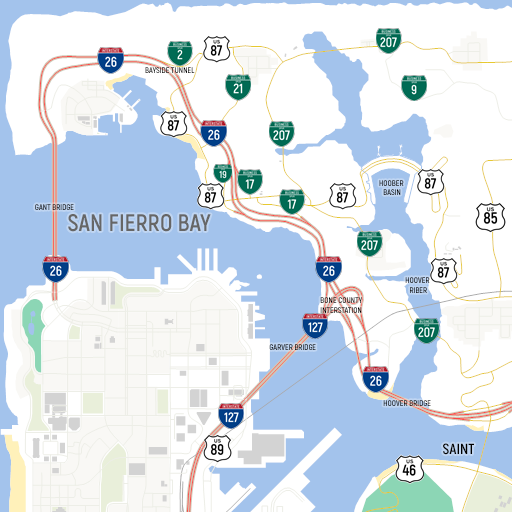
<style>
.page{position:relative;width:512px;height:512px;background:#ffffff}
.page>*{position:absolute;margin:0}
.t1{font:8px "Akrobat-Bold";color:#000000}
.t2{font:8px "Akrobat-Bold"}
.t3{font:24px "Akrobat-Bold";color:#666666}
.t4{font:14.7px "Akrobat-Bold";color:#000000}
</style>
<div class="page">
<p class="t1" style="left:145px;top:67px;width:50px;height:6px">BAYSIDE TUNNEL</p>
<p class="t1" style="left:379px;top:180px;width:25px;height:15px;text-align:center">HOOBER <br>BASIN</p>
<p class="t2" style="left:35px;top:204px;width:39px;height:6px">GANT BRIDGE</p>
<p class="t3" style="left:68px;top:214px;width:143px;height:18px">SAN FIERRO BAY</p>
<p class="t2" style="left:405px;top:277px;width:25px;height:16px;text-align:center">HOOVER <br>RIBER</p>
<p class="t1" style="left:320px;top:297px;width:42px;height:16px;text-align:right">BONE COUNTY<br>INTERSTATION</p>
<p class="t2" style="left:269px;top:344px;width:47px;height:6px">GARVER BRIDGE</p>
<p class="t2" style="left:383px;top:400px;width:48px;height:6px">HOOVER BRIDGE</p>
<p class="t4" style="left:443px;top:443px;width:31px;height:12px">SAINT</p>
</div>
